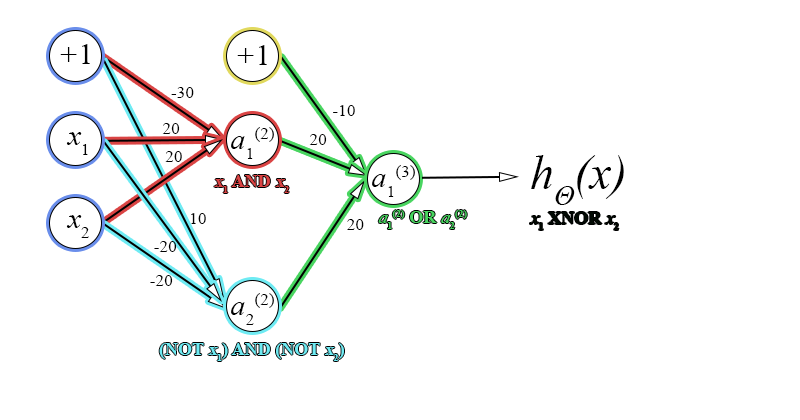
<style>
.page{position:relative;width:800px;height:420px;background:#ffffff}
.page>*{position:absolute;margin:0}
.t1{font:30px "TimesNewRomanPS-ItalicMT";color:#000000}
.t2{font:30px "TimesNewRomanPSMT";color:#000000}
.t3{font:48px "TimesNewRomanPS-ItalicMT";color:#000000}
.t4{font:18px "TimesNewRomanPS-BoldMT";color:#da4444}
.t5{font:18px "TimesNewRomanPS-BoldMT";color:#da4444;font-style:italic}
.t6{font:18px "TimesNewRomanPS-BoldMT";color:#49d560}
.t7{font:18px "TimesNewRomanPS-ItalicMT";color:#49d560;font-style:italic}
.t8{font:18px "TimesNewRomanPS-BoldMT";color:#010a03}
.t9{font:18px "TimesNewRomanPS-ItalicMT";color:#010a03;font-style:italic}
.t10{font:18px "TimesNewRomanPS-BoldMT";color:#6febf3}
.t11{font:18px "TimesNewRomanPS-BoldMT";color:#6febf3;font-style:italic}
</style>
<div class="page">
<p class="t1" style="left:60px;top:44px;width:30px;height:20px">+<span class="t2">1</span></p>
<p class="t1" style="left:237px;top:45px;width:30px;height:20px">+<span class="t2">1</span></p>
<p class="t2" style="left:171px;top:87px;width:23px;height:11px">-30</p>
<p class="t2" style="left:333px;top:105px;width:22px;height:11px">-10</p>
<p class="t2" style="left:162px;top:123px;width:18px;height:11px">20</p>
<p class="t1" style="left:66px;top:132px;width:22px;height:23px">x<span class="t2">1</span></p>
<p class="t2" style="left:231px;top:127px;width:43px;height:32px"><span class="t1">a</span>1(2)</p>
<p class="t2" style="left:309px;top:134px;width:18px;height:11px">20</p>
<p class="t2" style="left:165px;top:151px;width:17px;height:11px">20</p>
<p class="t3" style="left:531px;top:155px;width:93px;height:50px">hΘ(x)</p>
<p class="t2" style="left:372px;top:165px;width:43px;height:32px"><span class="t1">a</span>1(3)</p>
<p class="t4" style="left:214px;top:175px;width:75px;height:18px"><span class="t5">x</span>1 AND <span class="t5">x</span>2</p>
<p class="t1" style="left:66px;top:215px;width:23px;height:23px">x<span class="t2">2</span></p>
<p class="t2" style="left:191px;top:213px;width:15px;height:11px">10</p>
<p class="t2" style="left:347px;top:219px;width:17px;height:11px">20</p>
<p class="t6" style="left:378px;top:210px;width:89px;height:19px"><span class="t7">a</span>1(2) OR <span class="t7">a</span>2(2)</p>
<p class="t8" style="left:530px;top:212px;width:89px;height:18px"><span class="t9">x</span>1 XNOR <span class="t9">x</span>2</p>
<p class="t2" style="left:154px;top:241px;width:23px;height:11px">-20</p>
<p class="t2" style="left:150px;top:275px;width:23px;height:11px">-20</p>
<p class="t2" style="left:231px;top:293px;width:43px;height:32px"><span class="t1">a</span>2(2)</p>
<p class="t10" style="left:159px;top:343px;width:185px;height:18px">(NOT <span class="t11">x</span>1) AND (NOT <span class="t11">x</span>2)</p>
</div>
